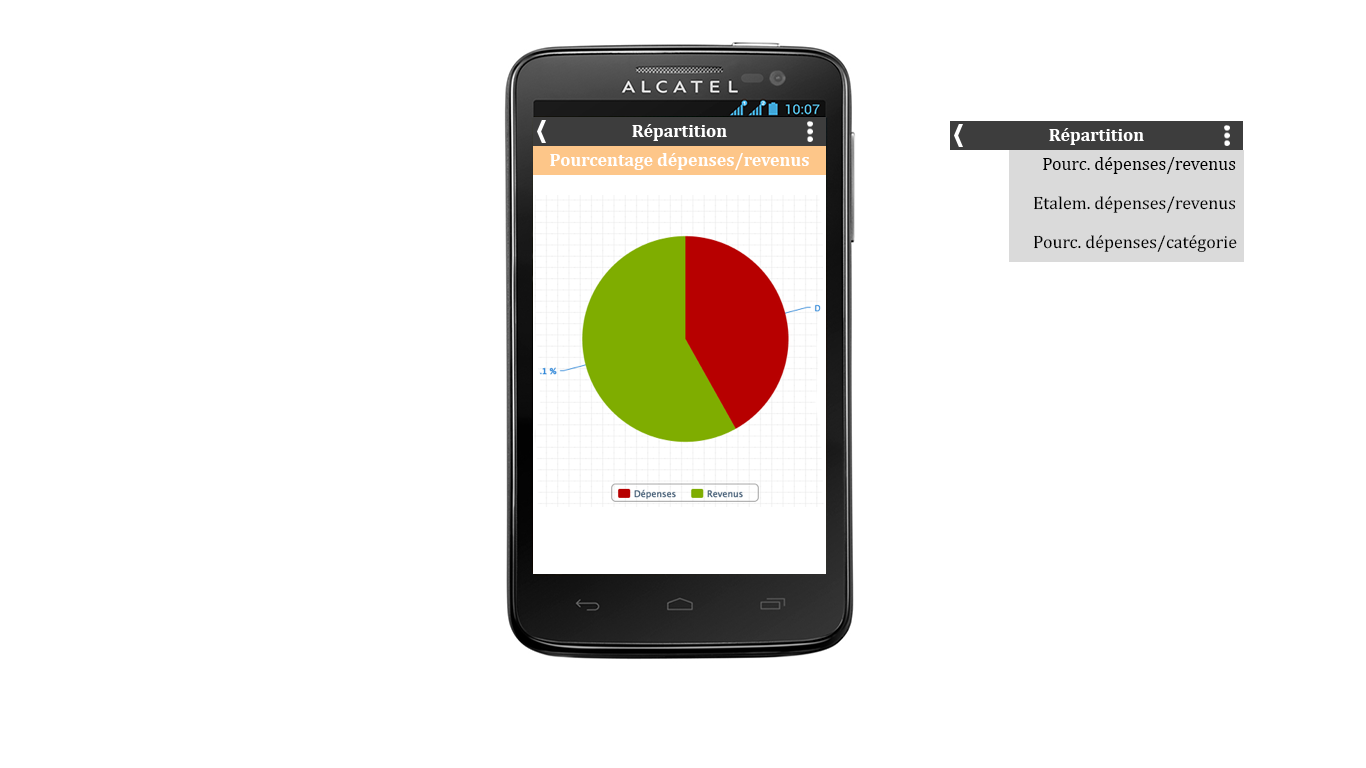
<style>
.page{position:relative;width:1366px;height:768px;background:#ffffff}
.page>*{position:absolute;margin:0}
.t1{font:18px "Cambria-Bold";color:#ffffff}
.t2{font:18px "Cambria";color:#000000}
</style>
<div class="page">
<p class="t1" style="left:632px;top:124px;width:95px;height:17px">Répartition</p>
<p class="t1" style="left:1049px;top:128px;width:95px;height:17px">Répartition</p>
<p class="t1" style="left:550px;top:153px;width:259px;height:17px">Pourcentage dépenses/revenus</p>
<p class="t2" style="left:1043px;top:157px;width:193px;height:17px">Pourc. dépenses/revenus</p>
<p class="t2" style="left:1034px;top:196px;width:202px;height:17px">Etalem. dépenses/revenus</p>
<p class="t2" style="left:1034px;top:235px;width:203px;height:18px">Pourc. dépenses/catégorie</p>
</div>
